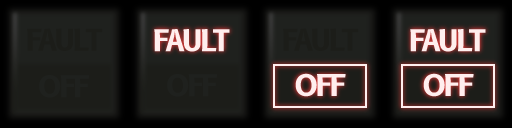
<style>
.page{position:relative;width:512px;height:128px}
.page>*{position:absolute;margin:0}
.t1{font:29.2px "B612-Bold";letter-spacing:-0.075em;color:#1c1d19}
.t2{font:29.2px "B612-Bold";letter-spacing:-0.075em;color:#1f211e}
</style>
<div class="page">
<p class="t1" style="left:27px;top:28px;width:76px;height:23px">FAULT</p>
<p class="t1" style="left:283px;top:28px;width:76px;height:23px">FAULT</p>
<p class="t2" style="left:39px;top:75px;width:51px;height:23px">OFF</p>
<p class="t2" style="left:167px;top:74px;width:51px;height:23px">OFF</p>
</div>
